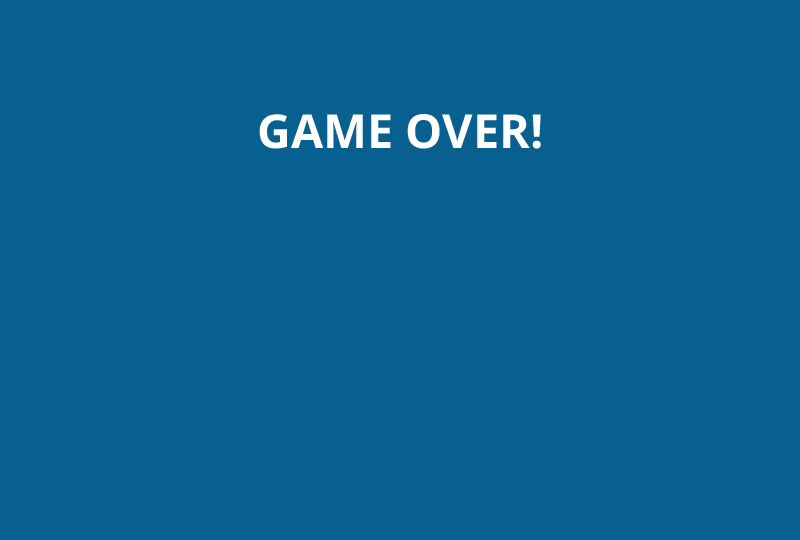
<style>
.page{position:relative;width:800px;height:540px;background:#07608f}
.page>*{position:absolute;margin:0}
.t1{font:46.7px "OpenSans-Bold";color:#ffffff}
</style>
<div class="page">
<p class="t1" style="left:259px;top:114px;width:282px;height:35px">GAME OVER!</p>
</div>
